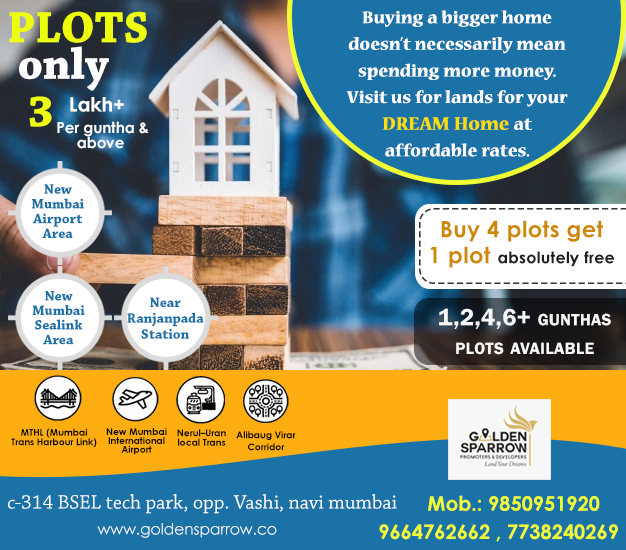
<style>
.page{position:relative;width:626px;height:550px;background:#1b72a7}
.page>*{position:absolute;margin:0}
.t1{font:46.3px/36.6px "ChaparralPro-Bold";letter-spacing:-0.005em;color:#edff0c;text-transform:uppercase}
.t2{font:46.3px/36.6px "ChaparralPro-Bold";letter-spacing:-0.005em;color:#ffffff}
.t3{font:46.3px/36.6px "ChaparralPro-Bold";letter-spacing:-0.005em;color:#edff0c}
.t4{font:18.7px/26.6px "NuevaStd-Bold";letter-spacing:-0.005em;color:#ffffff;font-weight:bold}
.t5{font:20px/26.6px "NuevaStd-Bold";letter-spacing:-0.005em;color:#ffde00;font-weight:bold}
.t6{font:19.7px "CenturyGothic-Bold";letter-spacing:-0.005em;color:#ffffff}
.t7{font:15.2px/15.2px "CenturyGothic-Bold";letter-spacing:-0.005em;color:#ffffff}
.t8{font:14.5px/14.8px "ChaparralPro-Bold";letter-spacing:-0.005em;color:#1b72a7}
.t9{font:22.6px/25.9px "CenturyGothic-Bold";letter-spacing:0.015em;color:#cd8800}
.t10{font:15.9px/25.9px "CenturyGothic-Bold";letter-spacing:0.015em;color:#1f1f1f}
.t11{font:14.5px/14.6px "ChaparralPro-Bold";letter-spacing:-0.005em;color:#1b72a7}
.t12{font:14.5px/15.9px "ChaparralPro-Bold";letter-spacing:-0.005em;color:#1b72a7}
.t13{font:24.2px/28.9px "FranklinGothic-Demi";letter-spacing:0.015em;color:#f7f7f7;font-variant:small-caps}
.t14{font:9.5px/9.5px "CenturyGothic-Bold";letter-spacing:-0.005em;color:#000000}
.t15{font:9.5px/8.8px "CenturyGothic-Bold";letter-spacing:-0.005em;color:#000000}
.t16{font:9.5px/9.4px "CenturyGothic-Bold";letter-spacing:-0.005em;color:#000000}
.t17{font:9.5px/12px "CenturyGothic-Bold";letter-spacing:-0.005em;color:#000000}
.t18{font:20.5px "ChaparralPro-Regular";letter-spacing:-0.005em;color:#fefefe}
.t19{font:20.2px "CenturyGothic-Bold";letter-spacing:-0.005em;color:#f0ff33}
.t20{font:15.5px "CenturyGothic";letter-spacing:-0.005em;color:#ffffff}
</style>
<div class="page">
<p class="t1" style="left:9px;top:11px;width:138px;height:116px">Plots         <span class="t2">only             </span><span class="t3">3</span></p>
<p class="t4" style="left:346px;top:10px;width:222px;height:147px;text-align:center">Buying a bigger home doesn’t necessarily mean spending more money. <br>Visit us for lands for your <span class="t5">DREAM Home </span>at                     affordable rates.</p>
<p class="t6" style="left:70px;top:97px;width:54px;height:15px">Lakh+</p>
<p class="t7" style="left:57px;top:121px;width:92px;height:28px;text-align:center">Per guntha &amp; above</p>
<p class="t8" style="left:32px;top:184px;width:52px;height:54px;text-align:center">New Mumbai Airport Area</p>
<p class="t9" style="left:430px;top:220px;width:184px;height:48px;text-align:center">Buy 4 plots get     1 plot <span class="t10">absolutely free</span></p>
<p class="t11" style="left:32px;top:291px;width:53px;height:54px;text-align:center">New Mumbai     Sealink Area</p>
<p class="t12" style="left:127px;top:297px;width:77px;height:42px;text-align:center">Near        Ranjanpada Station</p>
<p class="t13" style="left:439px;top:308px;width:172px;height:47px;text-align:center">1,2,4,6+ gunthas plots available</p>
<p class="t14" style="left:11px;top:428px;width:86px;height:19px;text-align:center">MTHL (Mumbai Trans Harbour Link)</p>
<p class="t15" style="left:106px;top:428px;width:61px;height:27px;text-align:center">New Mumbai International Airport</p>
<p class="t16" style="left:177px;top:429px;width:49px;height:17px;text-align:center">Nerul–Uran local Trans</p>
<p class="t17" style="left:236px;top:431px;width:60px;height:20px;text-align:center">Alibaug Virar Corridor</p>
<p class="t18" style="left:8px;top:494px;width:389px;height:20px">c-314 BSEL tech park, opp. Vashi, navi mumbai</p>
<p class="t19" style="left:428px;top:495px;width:172px;height:16px">Mob.: 9850951920</p>
<p class="t20" style="left:97px;top:523px;width:180px;height:15px">www.goldensparrow.co</p>
<p class="t19" style="left:379px;top:524px;width:239px;height:18px">9664762662 , 7738240269</p>
</div>
